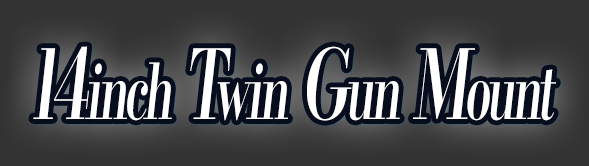
<style>
.page{position:relative;width:589px;height:166px;background:#333333}
.page>*{position:absolute;margin:0}
.t1{font:76.8px "KochoStd-Heavy";letter-spacing:-0.08em;color:#ffffff;font-style:italic;scale:0.62 1}
.t2{font:96px "KochoStd-Heavy";letter-spacing:-0.08em;color:#ffffff;font-style:italic;scale:0.62 1}
</style>
<div class="page">
<p class="t1" style="left:33px;top:46px;width:523px;height:75px"><span class="t2">14</span>inch<span class="t2"> T</span>win<span class="t2"> G</span>un<span class="t2"> M</span>ount</p>
</div>
